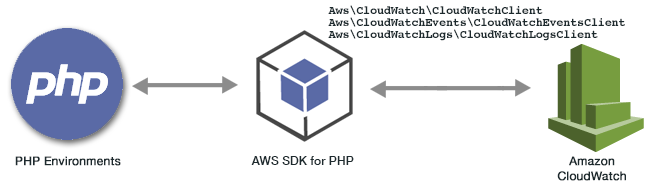
<style>
.page{position:relative;width:650px;height:190px;background:#ffffff}
.page>*{position:absolute;margin:0}
.t1{font:12px/12px "Courier-Bold";letter-spacing:-0.025em;color:#1d2a2e}
.t2{font:12px "HelveticaNeue";color:#1d2a2e;font-weight:bold}
.t3{font:12.1px "HelveticaNeue-Medium";color:#1d2a2e}
</style>
<div class="page">
<p class="t1" style="left:328px;top:5px;width:297px;height:36px">Aws\CloudWatch\CloudWatchClient<br>Aws\CloudWatchEvents\CloudWatchEventsClient<br>Aws\CloudWatchLogs\CloudWatchLogsClient</p>
<p class="t2" style="left:15px;top:156px;width:106px;height:10px">PHP Environments</p>
<p class="t3" style="left:251px;top:156px;width:103px;height:9px">AWS SDK for PHP</p>
<p class="t2" style="left:557px;top:156px;width:69px;height:25px;text-align:center">Amazon<br>CloudWatch</p>
</div>
